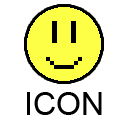
<style>
.page{position:relative;width:128px;height:128px;background:#ffffff}
.page>*{position:absolute;margin:0}
.t1{font:32px "ArialMT";color:#000000}
</style>
<div class="page">
<p class="t1" style="left:27px;top:92px;width:75px;height:23px">ICON</p>
</div>
